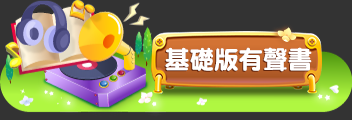
<style>
.page{position:relative;width:352px;height:120px;background:#333333}
.page>*{position:absolute;margin:0}
.t1{font:25.1px "DFNYuan-W9-WINP-BF";color:#ffffff}
</style>
<div class="page">
<p class="t1" style="left:165px;top:47px;width:147px;height:25px">基礎版有聲書</p>
</div>
